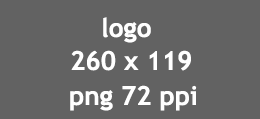
<style>
.page{position:relative;width:260px;height:119px;background:#626262}
.page>*{position:absolute;margin:0}
.t1{font:26.2px "TrebuchetMS-Bold";color:#ffffff}
</style>
<div class="page">
<p class="t1" style="left:103px;top:17px;width:48px;height:26px">logo</p>
<p class="t1" style="left:71px;top:50px;width:120px;height:21px">260 x 119</p>
<p class="t1" style="left:70px;top:85px;width:127px;height:26px">png 72 ppi</p>
</div>
